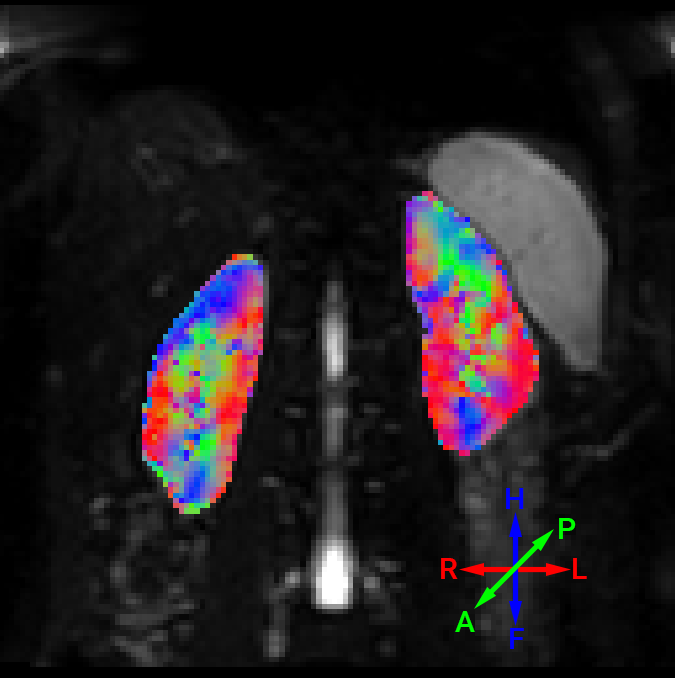
<style>
.page{position:relative;width:675px;height:678px}
.page>*{position:absolute;margin:0}
.t1{font:30px "Roboto-Medium";color:#0000ff}
.t2{font:30px "Roboto-Medium";color:#00ff00}
.t3{font:30px "Roboto-Medium";color:#ff0000}
</style>
<div class="page">
<p class="t1" style="left:506px;top:488px;width:18px;height:21px">H</p>
<p class="t2" style="left:559px;top:518px;width:17px;height:21px">P</p>
<p class="t3" style="left:441px;top:558px;width:17px;height:21px">R</p>
<p class="t3" style="left:573px;top:558px;width:14px;height:21px">L</p>
<p class="t2" style="left:455px;top:611px;width:20px;height:21px">A</p>
<p class="t1" style="left:510px;top:628px;width:14px;height:21px">F</p>
</div>
